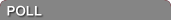
<style>
.page{position:relative;width:171px;height:20px;background:#858585}
.page>*{position:absolute;margin:0}
.t1{font:13.3px "Arial-BoldMT";color:#ffffff}
</style>
<div class="page">
<p class="t1" style="left:7px;top:5px;width:35px;height:11px">POLL</p>
</div>
